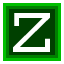
<style>
.page{position:relative;width:64px;height:64px;background:#004000}
.page>*{position:absolute;margin:0}
.t1{font:90px "Courier";color:#ffffff}
</style>
<div class="page">
<p class="t1" style="left:13px;top:13px;width:37px;height:39px">z</p>
</div>
